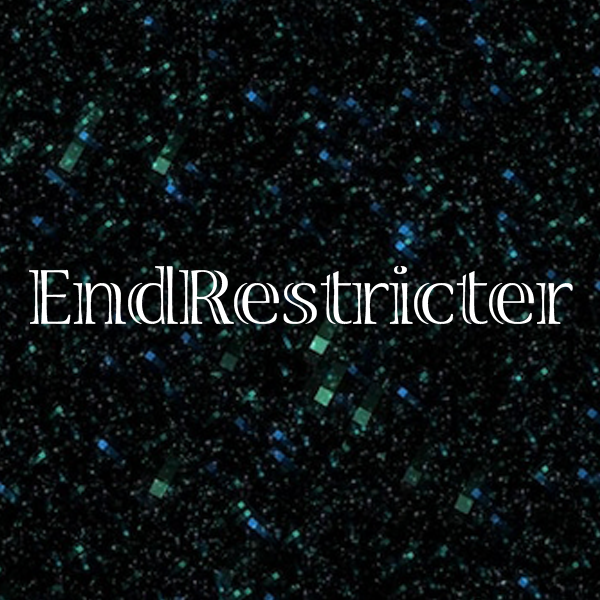
<style>
.page{position:relative;width:600px;height:600px}
.page>*{position:absolute;margin:0}
.t1{font:79.6px "VivaStd-Regular";color:#ffffff}
</style>
<div class="page">
<p class="t1" style="left:29px;top:266px;width:544px;height:59px">EndRestricter</p>
</div>
